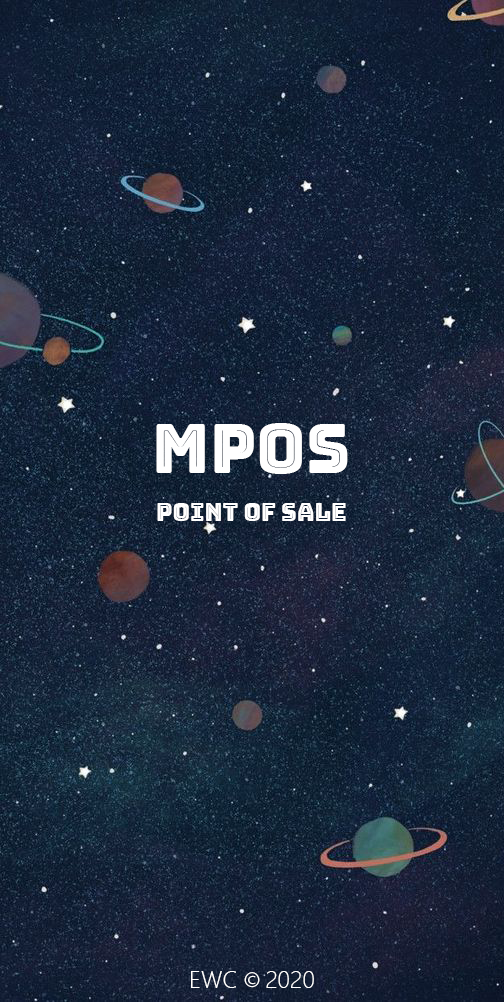
<style>
.page{position:relative;width:504px;height:1002px}
.page>*{position:absolute;margin:0}
.t1{font:67.6px "BungeeInline-Regular";color:#ffffff}
.t2{font:24px "BungeeInline-Regular";color:#ffffff}
.t3{font:24px "SegoeUI-Light";color:#ffffff}
.t4{font:24px "MyriadPro-Regular";color:#ffffff}
</style>
<div class="page">
<p class="t1" style="left:156px;top:423px;width:192px;height:51px">mPOS</p>
<p class="t2" style="left:157px;top:503px;width:189px;height:18px">point of sale</p>
<p class="t3" style="left:191px;top:971px;width:123px;height:17px">EWC <span class="t4">© </span>2020</p>
</div>
